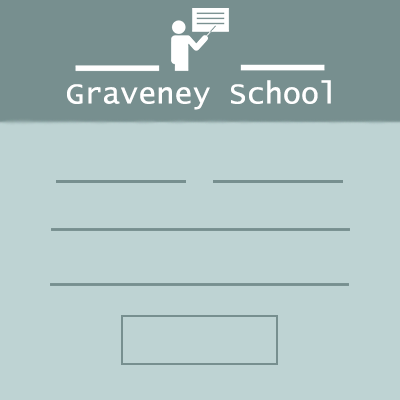
<style>
.page{position:relative;width:400px;height:400px;background:#bed3d3}
.page>*{position:absolute;margin:0}
.t1{font:30px "LucidaConsole";color:#ffffff}
</style>
<div class="page">
<p class="t1" style="left:67px;top:80px;width:264px;height:30px">Graveney School</p>
</div>
